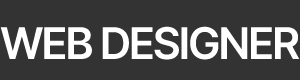
<style>
.page{position:relative;width:300px;height:80px;background:#333333}
.page>*{position:absolute;margin:0}
.t1{font:45px "Pretendard-SemiBold";letter-spacing:-0.05em;color:#ffffff}
</style>
<div class="page">
<p class="t1" style="left:0px;top:26px;width:300px;height:34px">WEB DESIGNER</p>
</div>
